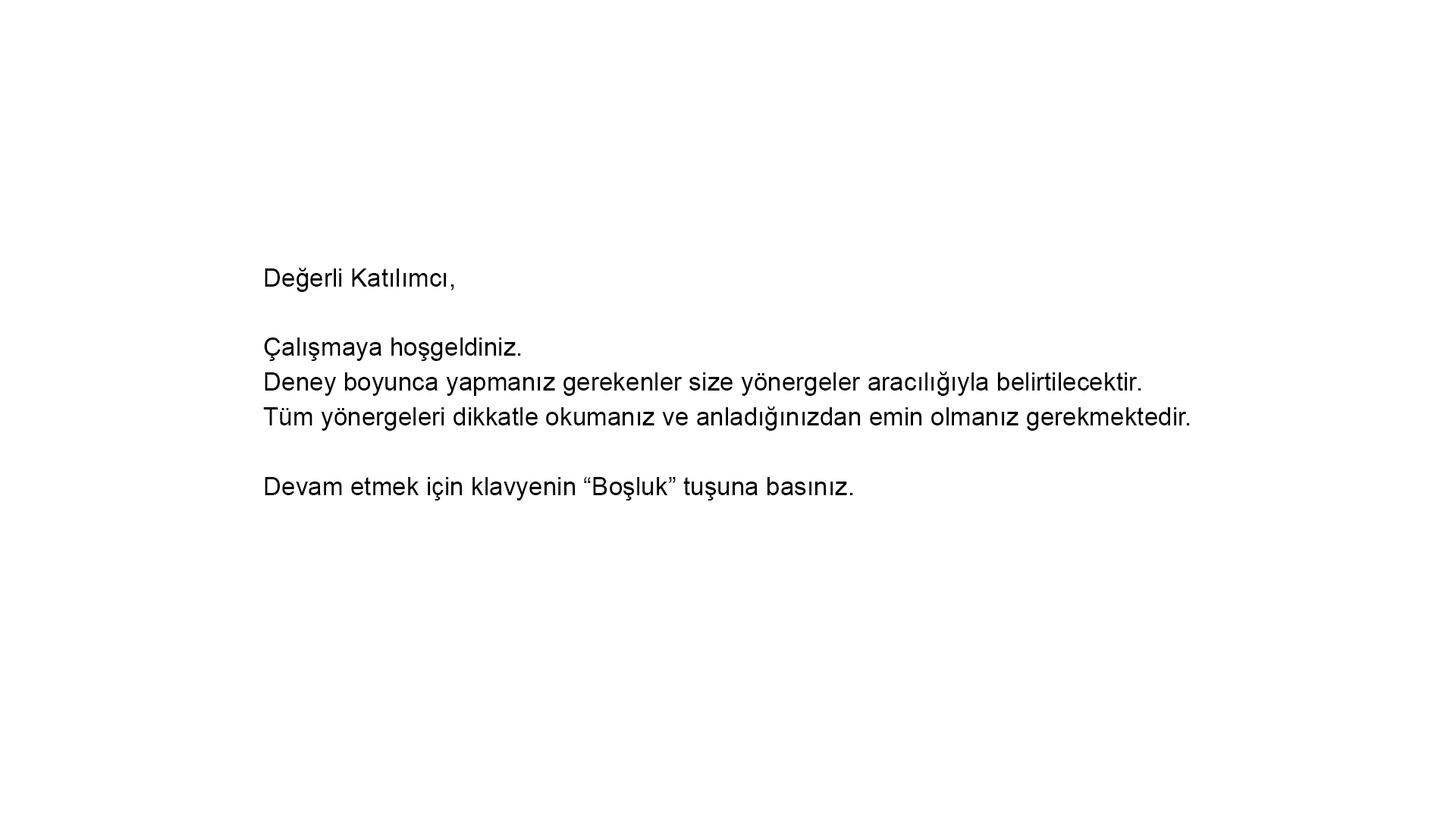
<style>
.page{position:relative;width:1456px;height:819px;background:#ffffff}
.page>*{position:absolute;margin:0}
.t1{font:25.3px/34.8px "ArialMT";color:#000000}
</style>
<div class="page">
<p class="t1" style="left:263px;top:268px;width:927px;height:232px">Değerli Katılımcı,<br><br>Çalışmaya hoşgeldiniz.<br>Deney boyunca yapmanız gerekenler size yönergeler aracılığıyla belirtilecektir.<br>Tüm yönergeleri dikkatle okumanız ve anladığınızdan emin olmanız gerekmektedir.<br><br>Devam etmek için klavyenin “Boşluk” tuşuna basınız.</p>
</div>
